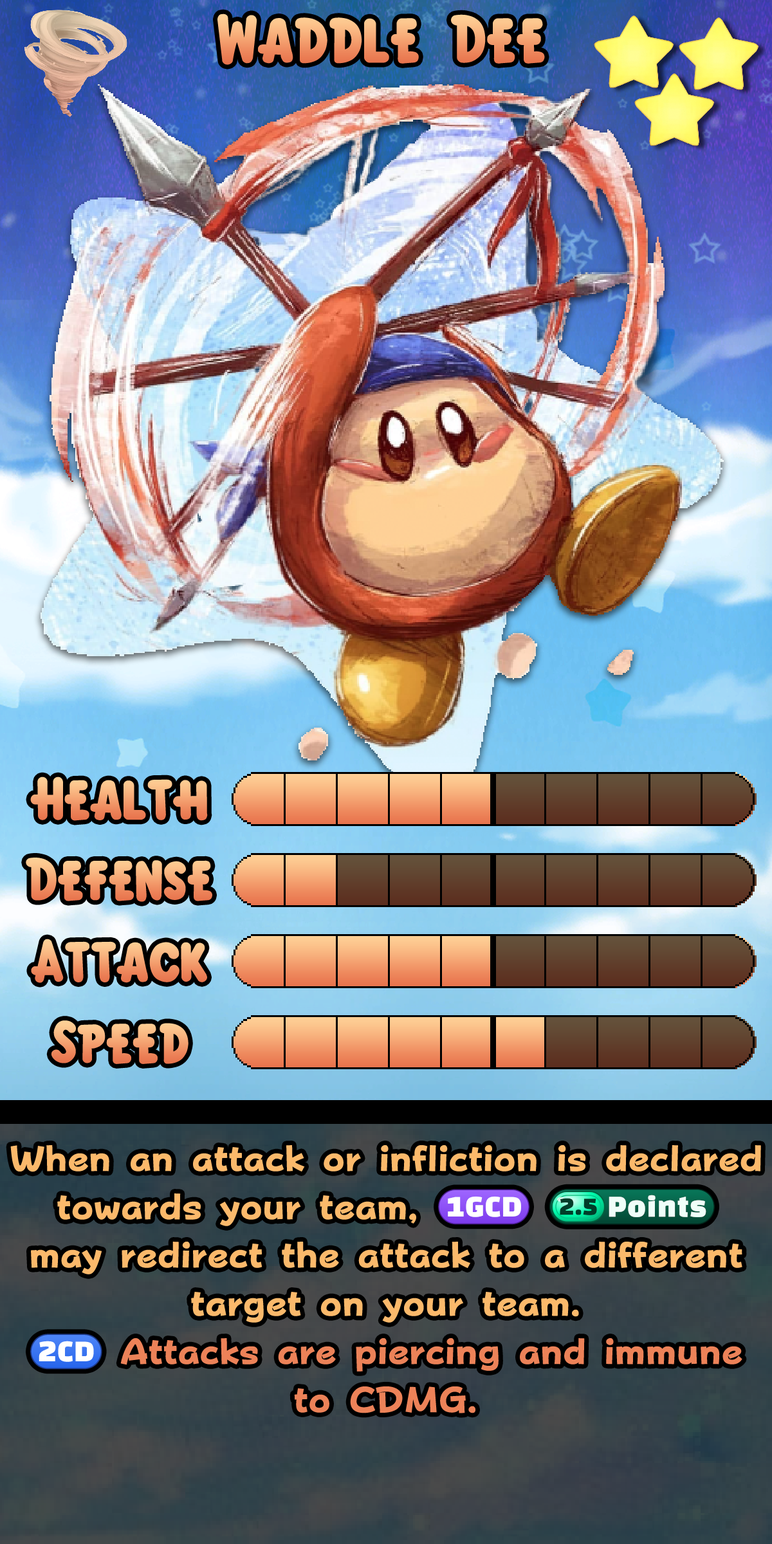
<style>
.page{position:relative;width:772px;height:1544px}
.page>*{position:absolute;margin:0}
.t1{font:104.2px "KirbyClassic"}
.t2{font:92.7px "KirbyClassic"}
.t3{font:61.8px/48.3px "FOTPopHappinessStrp-ExtraBold";color:#fbb96b}
.t4{font:61.8px/48.3px "stoogedings-Regular";letter-spacing:0.5em;color:#fbb96b}
.t5{font:63px/48.3px "stoogedings-Regular";letter-spacing:0.5em;color:#fbb96b}
.t6{font:61.8px/48.3px "stoogedings-Regular";color:#ec8258}
.t7{font:61.8px/48.3px "FOTPopHappinessStrp-ExtraBold";color:#ec8258}
</style>
<div class="page">
<p class="t1" style="left:217px;top:14px;width:328px;height:51px">Waddle Dee</p>
<p class="t2" style="left:30px;top:777px;width:178px;height:44px">Health</p>
<p class="t2" style="left:26px;top:858px;width:186px;height:44px">Defense</p>
<p class="t2" style="left:31px;top:939px;width:176px;height:44px">Attack</p>
<p class="t2" style="left:51px;top:1021px;width:138px;height:43px">Speed</p>
<p class="t3" style="left:10px;top:1145px;width:751px;height:269px;text-align:center">When an attack or infliction is declared towards your team, <span class="t4">(1GCD)</span><span class="t5">(2.5 points)</span> may redirect the attack to a different target on your team.<br><span class="t6">(2CD)</span><span class="t7"> Attacks are piercing and immune to CDMG.</span></p>
</div>
